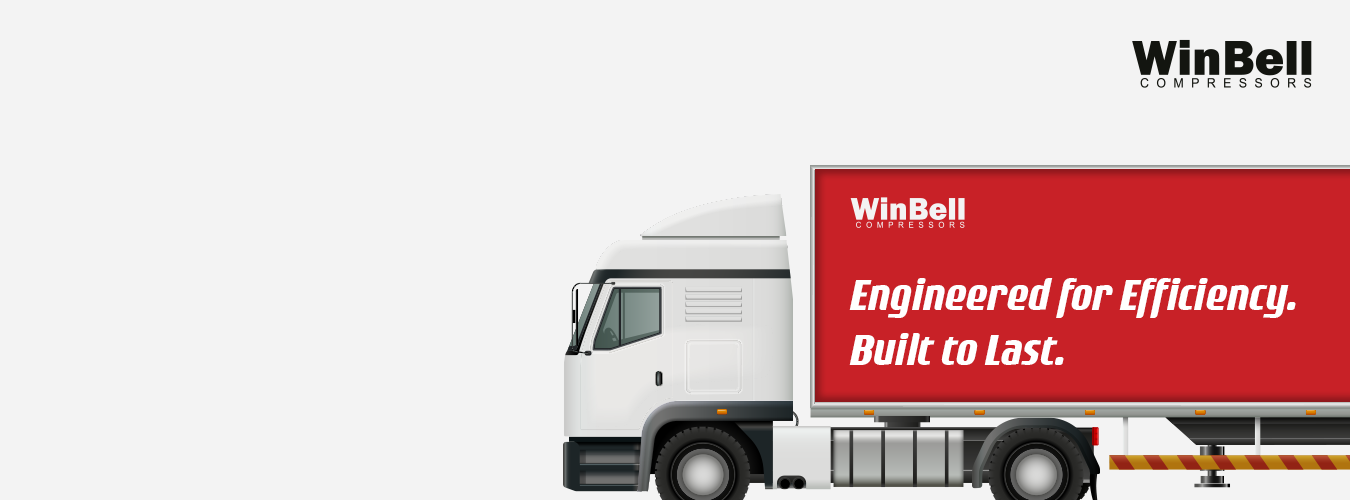
<style>
.page{position:relative;width:1350px;height:500px;background:#f3f3f3}
.page>*{position:absolute;margin:0}
.t1{font:45.8px "RogueSansBoldItalic";color:#ffffff}
</style>
<div class="page">
<p class="t1" style="left:849px;top:278px;width:447px;height:87px">Engineered for Efficiency. <br>Built to Last.</p>
</div>
